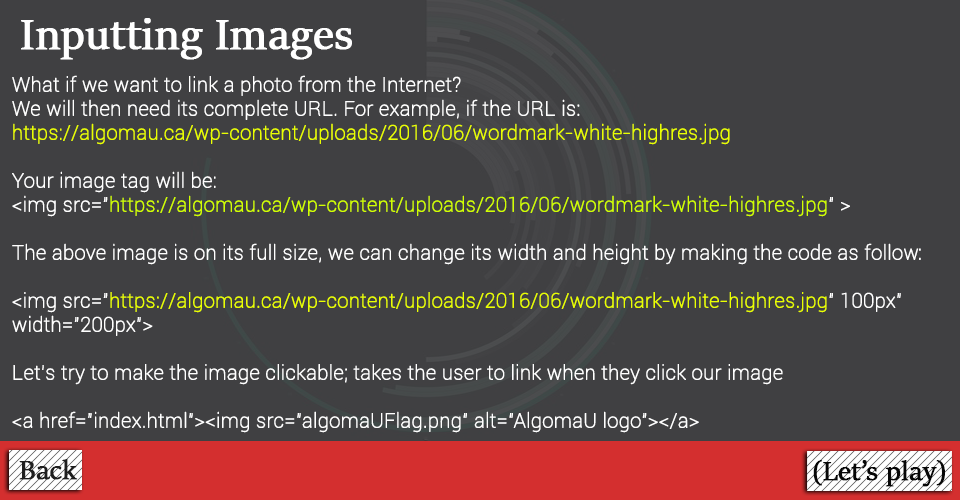
<style>
.page{position:relative;width:960px;height:500px;background:#404042}
.page>*{position:absolute;margin:0}
.t1{font:48px "SitkaBanner";color:#ffffff;font-weight:bold}
.t2{font:20px "Roboto-Thin";color:#ffffff;font-weight:bold}
.t3{font:20px "Roboto-Thin";color:#eaff00;font-weight:bold}
.t4{font:20px "Roboto-Thin";color:#d2ff00;font-weight:bold}
.t5{font:30px "SitkaBanner";color:#1e1e1e;font-weight:bold}
.t6{font:30px "SitkaBanner";color:#060606;font-weight:bold}
</style>
<div class="page">
<p class="t1" style="left:21px;top:18px;width:331px;height:42px">Inputting Images</p>
<p class="t2" style="left:12px;top:75px;width:909px;height:358px">What if we want to link a photo from the Internet? <br>We will then need its complete URL. For example, if the URL is:<br><span class="t3">https://algomau.ca/wp-content/uploads/2016/06/wordmark-white-highres.jpg <br></span><br>Your image tag will be:<br>&lt;img src="<span class="t4">https://algomau.ca/wp-content/uploads/2016/06/wordmark-white-highres.jpg</span>" &gt;<br><br>The above image is on its full size, we can change its width and height by making the code as follow:<br><br>&lt;img src="<span class="t3">https://algomau.ca/wp-content/uploads/2016/06/wordmark-white-highres.jpg</span>" 100px" width="200px"&gt;<br><br>Let’s try to make the image clickable; takes the user to link when they click our image<br><br>&lt;a href="index.html"&gt;&lt;img src="algomaUFlag.png" alt="AlgomaU logo"&gt;&lt;/a&gt;<br><br>If you look at the above code you will notice that &lt;img src=" "&gt; is placed between &lt;a href=””&gt; and &lt;/a&gt;, it is very important that it be written this way to allow the image to be clicked to said link or page.<br><br>Code illustration, ‘index.html’ is where you want the user to be directed when they click on an image. ‘algomaUFlag.png’, is the image name followed by dot and the format.</p>
<p class="t5" style="left:19px;top:459px;width:59px;height:21px">Back</p>
<p class="t6" style="left:813px;top:460px;width:132px;height:27px">(Let’s play)</p>
</div>
